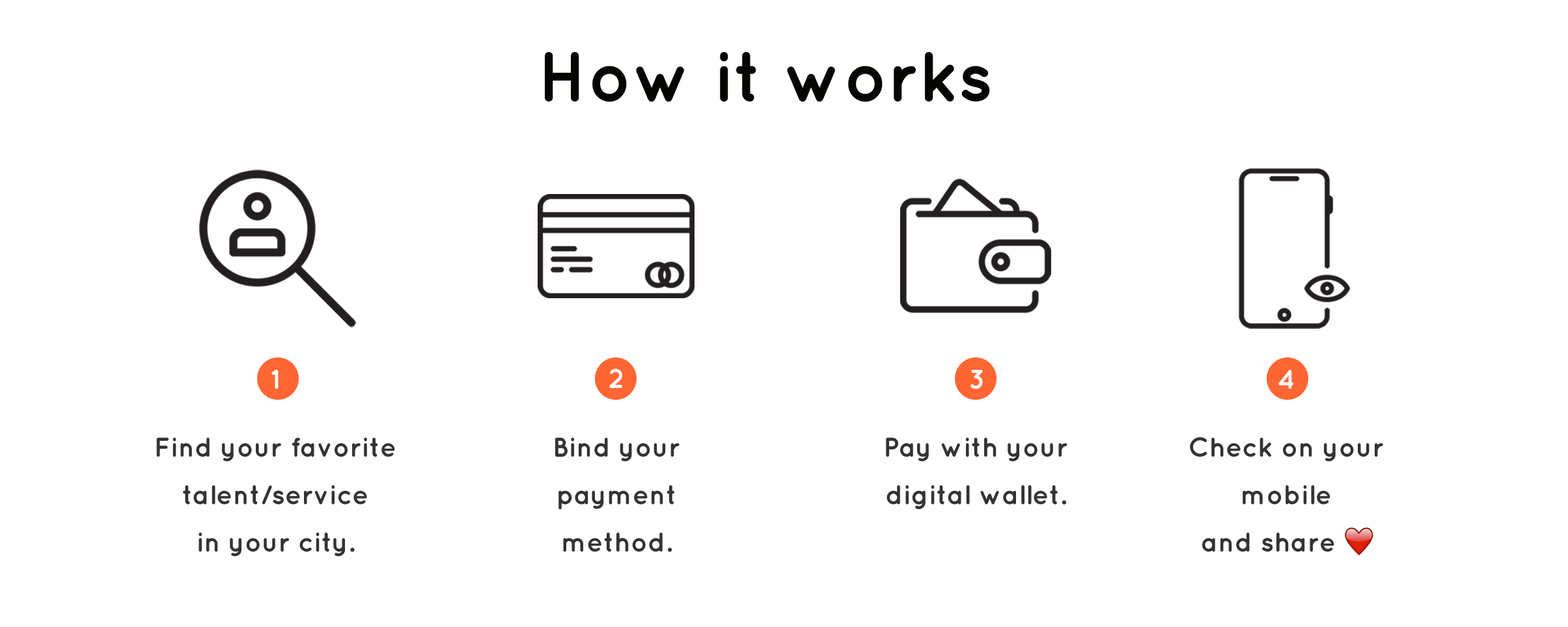
<style>
.page{position:relative;width:1568px;height:627px;background:#ffffff}
.page>*{position:absolute;margin:0}
.t1{font:70.5px "Quicksand-Bold";color:#050501}
.t2{font:27.1px "Quicksand-Bold";color:#ffffff}
.t3{font:5.4px "Quicksand-Bold";color:#050501}
.t4{font:27.1px "Quicksand-Bold";color:#333333}
.t5{font:27.1px "DFKaiShu-SB-Estd-BF";color:#333333}
</style>
<div class="page">
<p class="t1" style="left:545px;top:52px;width:445px;height:50px">How it works</p>
<p class="t2" style="left:271px;top:370px;width:8px;height:19px"><span class="t3"><br></span>1</p>
<p class="t2" style="left:609px;top:368px;width:13px;height:20px">2</p>
<p class="t2" style="left:970px;top:370px;width:13px;height:19px"><span class="t3"><br></span>3</p>
<p class="t2" style="left:1278px;top:370px;width:15px;height:19px"><span class="t3"><br></span>4</p>
<p class="t4" style="left:156px;top:437px;width:239px;height:120px;text-align:center">Find your favorite<br>talent/service<br>in your city.</p>
<p class="t4" style="left:555px;top:437px;width:125px;height:115px;text-align:center">Bind your<br>payment<br>method.</p>
<p class="t4" style="left:886px;top:437px;width:181px;height:72px;text-align:center">Pay with your<br>digital wallet.</p>
<p class="t4" style="left:1190px;top:437px;width:193px;height:115px;text-align:center">Check on your<br>mobile<br>and share <span class="t5">❤</span></p>
</div>
